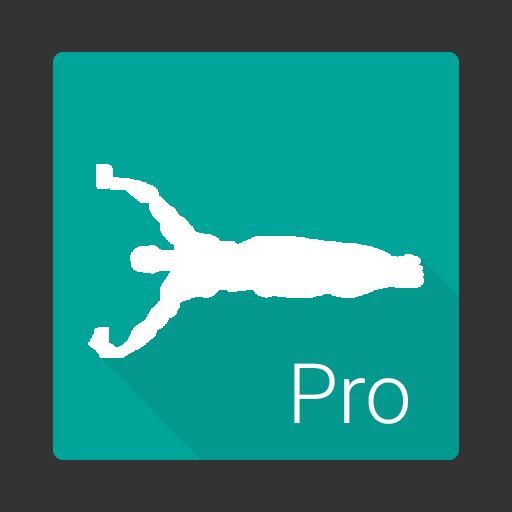
<style>
.page{position:relative;width:512px;height:512px;background:#333333}
.page>*{position:absolute;margin:0}
.t1{font:83.3px "Roboto-Light";color:#ffffff}
</style>
<div class="page">
<p class="t1" style="left:294px;top:363px;width:114px;height:61px">Pro</p>
</div>
